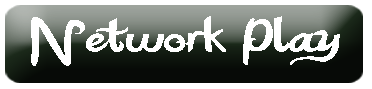
<style>
.page{position:relative;width:372px;height:89px;background:#ffffff}
.page>*{position:absolute;margin:0}
.t1{font:66.7px "KatyBerry";color:#ffffff;scale:1.3 1}
</style>
<div class="page">
<p class="t1" style="left:31px;top:16px;width:309px;height:50px">Network Play</p>
</div>
